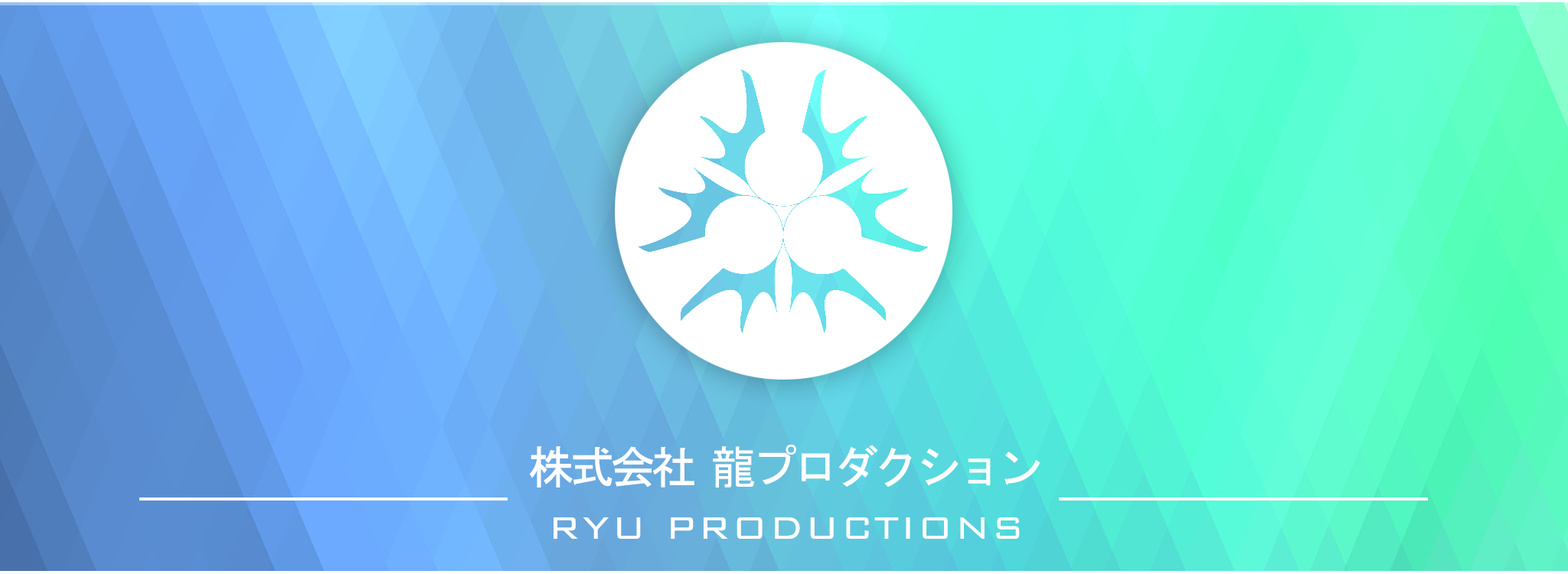
<style>
.page{position:relative;width:1568px;height:574px}
.page>*{position:absolute;margin:0}
.t1{font:45.4px "MS-Gothic";letter-spacing:-0.1em;color:#ffffff}
.t2{font:41.5px "BankGothicBT-Light";letter-spacing:0.05em;color:#ffffff}
</style>
<div class="page">
<p class="t1" style="left:529px;top:445px;width:511px;height:43px">株式会社 龍プロダクション</p>
<p class="t2" style="left:554px;top:518px;width:466px;height:21px">RYU PRODUCTIONS</p>
</div>
